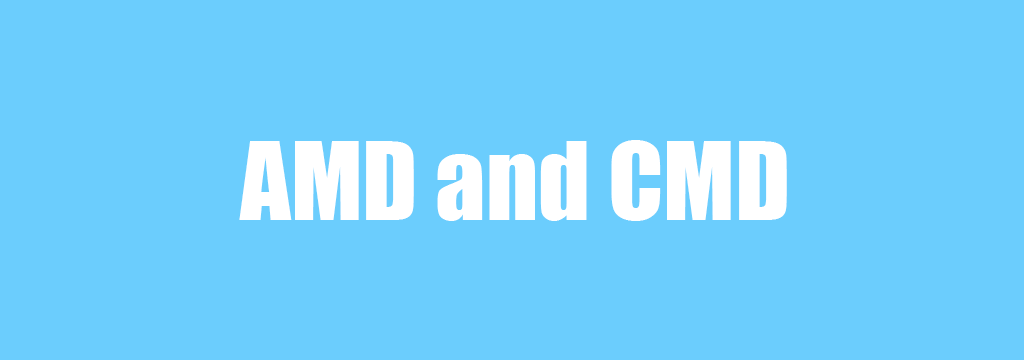
<style>
.page{position:relative;width:1024px;height:360px;background:#6bcdfd}
.page>*{position:absolute;margin:0}
.t1{font:100px "Impact";color:#ffffff}
</style>
<div class="page">
<p class="t1" style="left:239px;top:140px;width:548px;height:81px">AMD and CMD</p>
</div>
